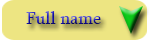
<style>
.page{position:relative;width:150px;height:40px;background:#ede582}
.page>*{position:absolute;margin:0}
.t1{font:18px "Sylfaen"}
</style>
<div class="page">
<p class="t1" style="left:26px;top:11px;width:75px;height:13px">Full name</p>
</div>
